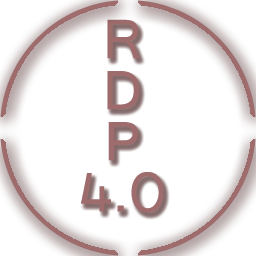
<style>
.page{position:relative;width:256px;height:256px;background:#ffffff}
.page>*{position:absolute;margin:0}
.t1{font:59.2px "Raavi";color:#9e6c6c}
</style>
<div class="page">
<p class="t1" style="left:80px;top:19px;width:84px;height:194px;text-align:center">R<br>D<br>P<br>4.0</p>
</div>
